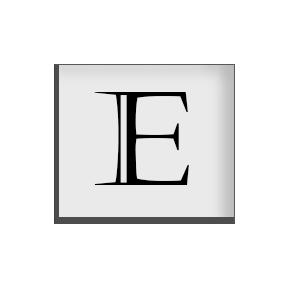
<style>
.page{position:relative;width:288px;height:288px;background:#ffffff}
.page>*{position:absolute;margin:0}
.t1{font:130px "Castellar";color:#000000;scale:1.35 1}
</style>
<div class="page">
<p class="t1" style="left:94px;top:92px;width:95px;height:93px">E</p>
</div>
